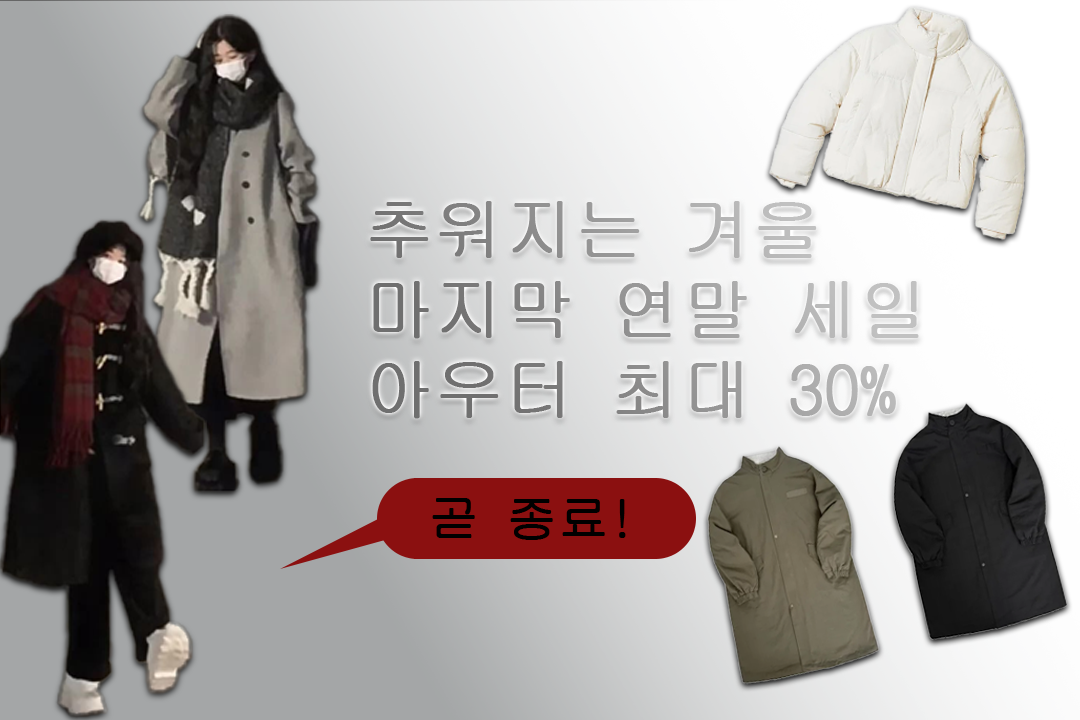
<style>
.page{position:relative;width:1080px;height:720px}
.page>*{position:absolute;margin:0}
.t1{font:68.5px/79.9px "GulimChe";font-weight:bold}
.t2{font:50px "GulimChe";color:#000000;font-weight:bold}
</style>
<div class="page">
<p class="t1" style="left:370px;top:201px;width:549px;height:218px">추워지는 겨울<br>마지막 연말 세일<br>아우터 최대 30%</p>
<p class="t2" style="left:432px;top:498px;width:194px;height:42px">곧 종료!</p>
</div>
